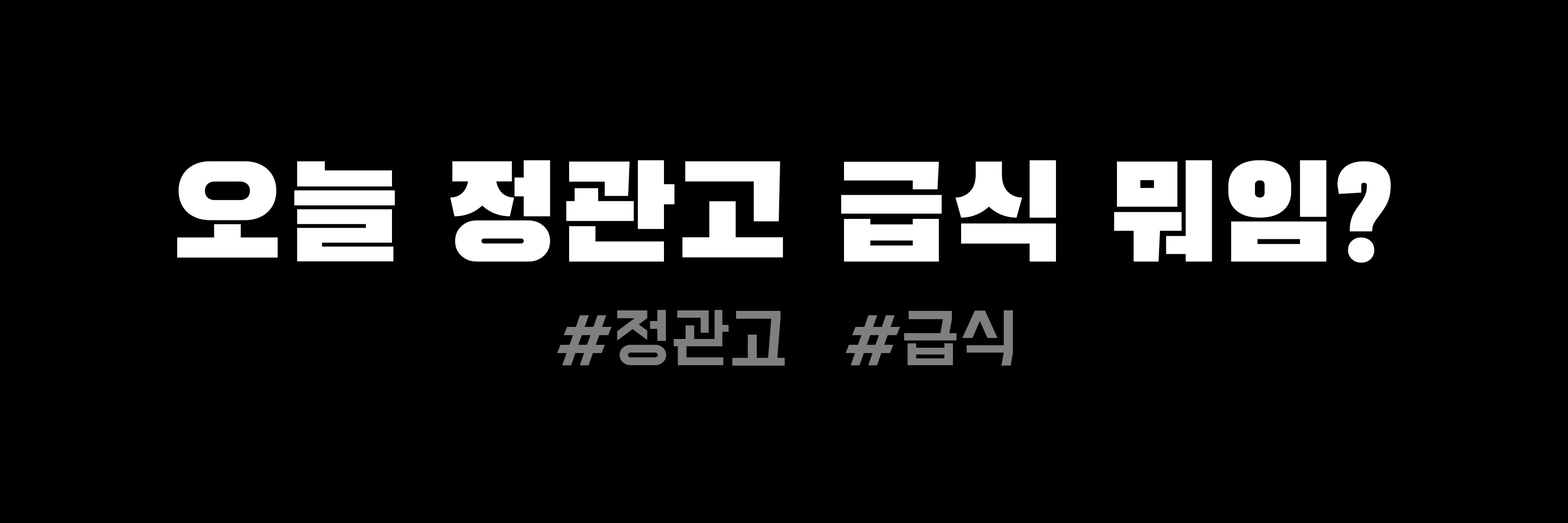
<style>
.page{position:relative;width:1568px;height:523px;background:#000000}
.page>*{position:absolute;margin:0}
.t1{font:133.1px "BlackHanSans-Regular";color:#ffffff;scale:1.05 1}
.t2{font:72.6px "DoHyeon-Regular";color:#7f7f7f;scale:1.05 1}
</style>
<div class="page">
<p class="t1" style="left:177px;top:160px;width:1214px;height:103px">오늘 정관고 급식 뭐임?</p>
<p class="t2" style="left:557px;top:310px;width:456px;height:55px">#정관고 #급식</p>
</div>
